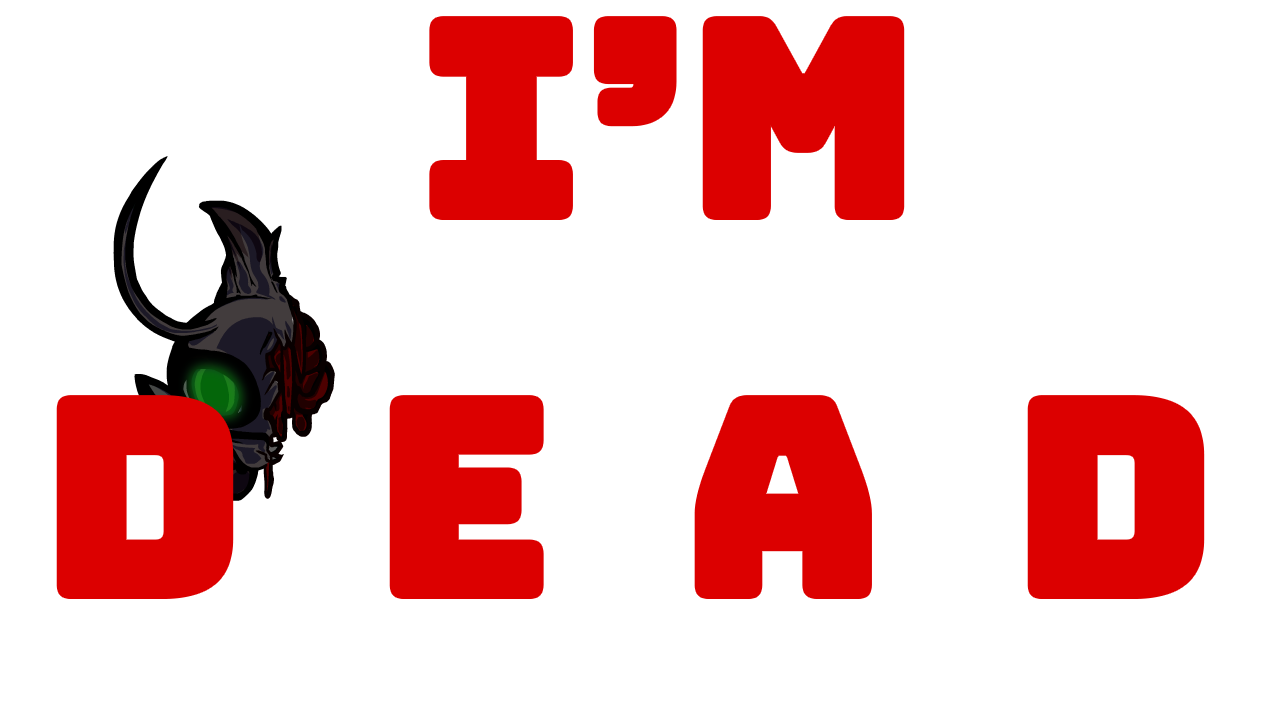
<style>
.page{position:relative;width:1279px;height:723px;background:#ffffff}
.page>*{position:absolute;margin:0}
.t1{font:272px "BungeeInline-Regular";color:#dc0000}
.t2{font:272px "BungeeInline-Regular";letter-spacing:0.48em;color:#dc0000}
</style>
<div class="page">
<p class="t1" style="left:433px;top:20px;width:468px;height:196px">i’m</p>
<p class="t2" style="left:60px;top:399px;width:1141px;height:196px">DEAD</p>
</div>
